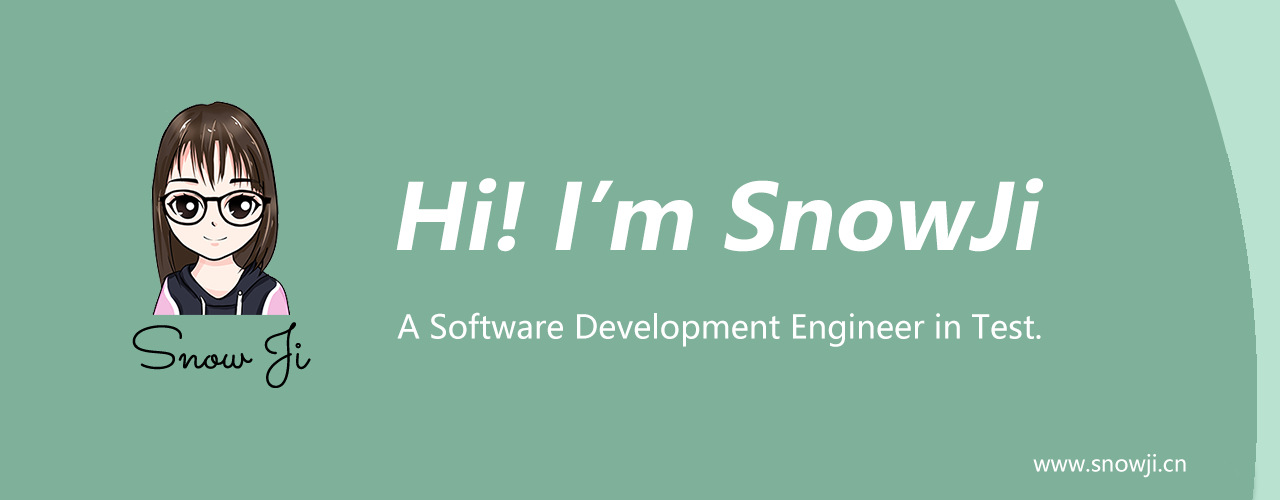
<style>
.page{position:relative;width:1280px;height:500px;background:#7eb09a}
.page>*{position:absolute;margin:0}
.t1{font:90px "MicrosoftYaHeiUI-Bold";color:#ffffff;font-style:italic}
.t2{font:32px "MicrosoftYaHeiUI";color:#ffffff}
.t3{font:22px "MicrosoftYaHeiUI";color:#ffffff}
</style>
<div class="page">
<p class="t1" style="left:396px;top:178px;width:647px;height:74px">Hi! I’m SnowJi</p>
<p class="t2" style="left:397px;top:312px;width:644px;height:35px">A Software Development Engineer in Test.</p>
<p class="t3" style="left:1033px;top:454px;width:153px;height:24px">www.snowji.cn</p>
</div>
